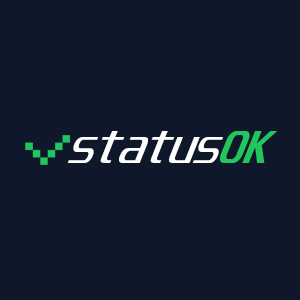
<style>
.page{position:relative;width:300px;height:300px;background:#0f172a}
.page>*{position:absolute;margin:0}
.t1{font:40px "Unispace-Italic";color:#ffffff;font-style:italic}
.t2{font:40px "Unispace-BoldItalic";color:#22c55e;font-style:italic}
</style>
<div class="page">
<p class="t1" style="left:67px;top:131px;width:211px;height:32px">status<span class="t2">OK</span></p>
</div>
